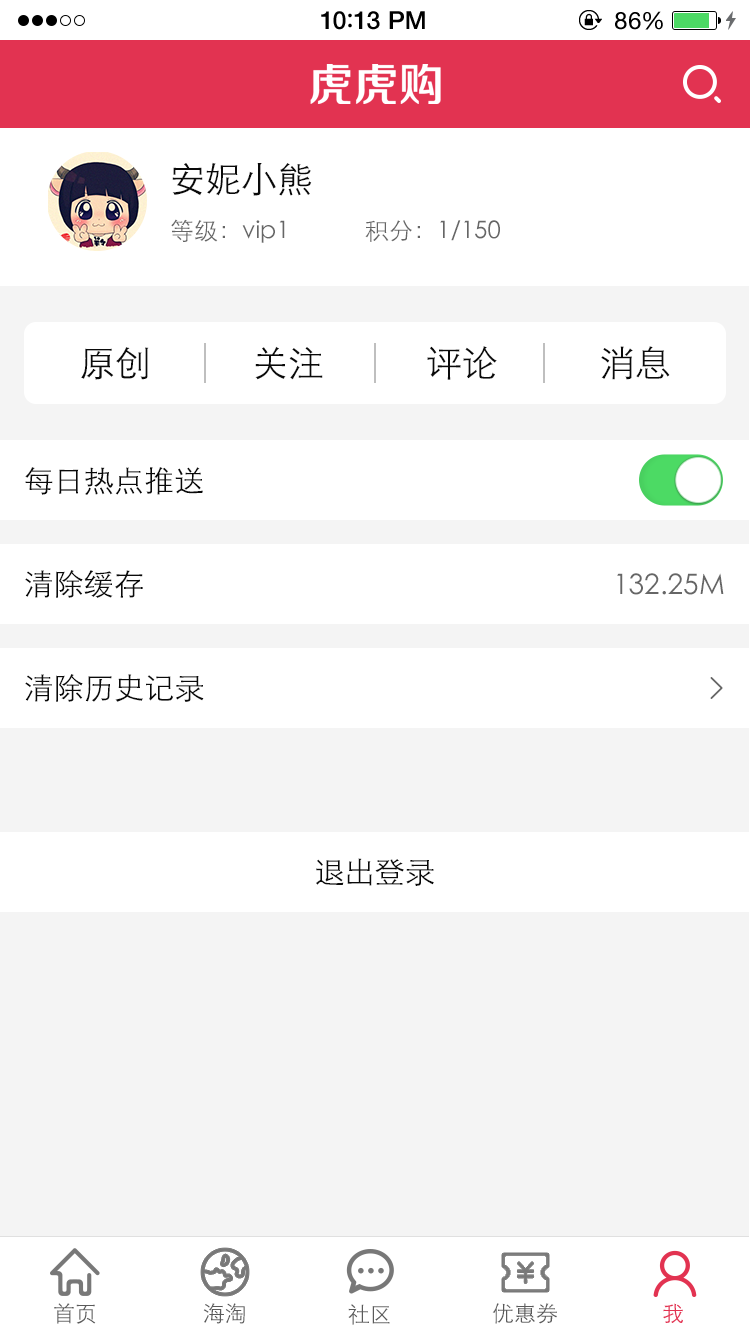
<style>
.page{position:relative;width:750px;height:1334px;background:#ffffff}
.page>*{position:absolute;margin:0}
.t1{font:25px "HelveticaNeue-Medium";letter-spacing:0.015em;color:#000000}
.t2{font:25px "ArialRoundedMTBold";letter-spacing:0.015em;color:#000000}
.t3{font:24px "HelveticaNeue";letter-spacing:0.03em;color:#000000}
.t4{font:36px "STXihei";color:#0a0a0a}
.t5{font:24px "STXihei";color:#666666}
.t6{font:30px "STXihei";color:#0a0a0a}
.t7{font:28.2px "STXihei";color:#666666}
.t8{font:21.9px "STXihei";color:#5a5a5a}
.t9{font:21.9px "STXihei";color:#e23351}
</style>
<div class="page">
<p class="t1" style="left:321px;top:11px;width:104px;height:19px">10<span class="t2">:</span>13 PM</p>
<p class="t3" style="left:615px;top:11px;width:48px;height:19px">86%</p>
<p class="t4" style="left:172px;top:162px;width:140px;height:34px">安妮小熊</p>
<p class="t5" style="left:171px;top:219px;width:114px;height:24px">等级：vip1</p>
<p class="t5" style="left:365px;top:220px;width:135px;height:22px">积分：1/150</p>
<p class="t4" style="left:81px;top:347px;width:68px;height:33px">原创</p>
<p class="t4" style="left:255px;top:346px;width:68px;height:34px">关注</p>
<p class="t4" style="left:427px;top:346px;width:70px;height:34px">评论</p>
<p class="t4" style="left:601px;top:346px;width:69px;height:34px">消息</p>
<p class="t6" style="left:25px;top:467px;width:178px;height:28px">每日热点推送</p>
<p class="t6" style="left:25px;top:570px;width:118px;height:28px">清除缓存</p>
<p class="t7" style="left:617px;top:573px;width:107px;height:22px">132.25M</p>
<p class="t6" style="left:25px;top:674px;width:179px;height:28px">清除历史记录</p>
<p class="t6" style="left:316px;top:858px;width:118px;height:28px">退出登录</p>
<p class="t8" style="left:54px;top:1303px;width:42px;height:21px">首页</p>
<p class="t8" style="left:203px;top:1303px;width:42px;height:21px">海淘</p>
<p class="t8" style="left:348px;top:1304px;width:42px;height:21px">社区</p>
<p class="t8" style="left:492px;top:1303px;width:65px;height:21px">优惠券</p>
<p class="t9" style="left:663px;top:1303px;width:20px;height:20px">我</p>
</div>
